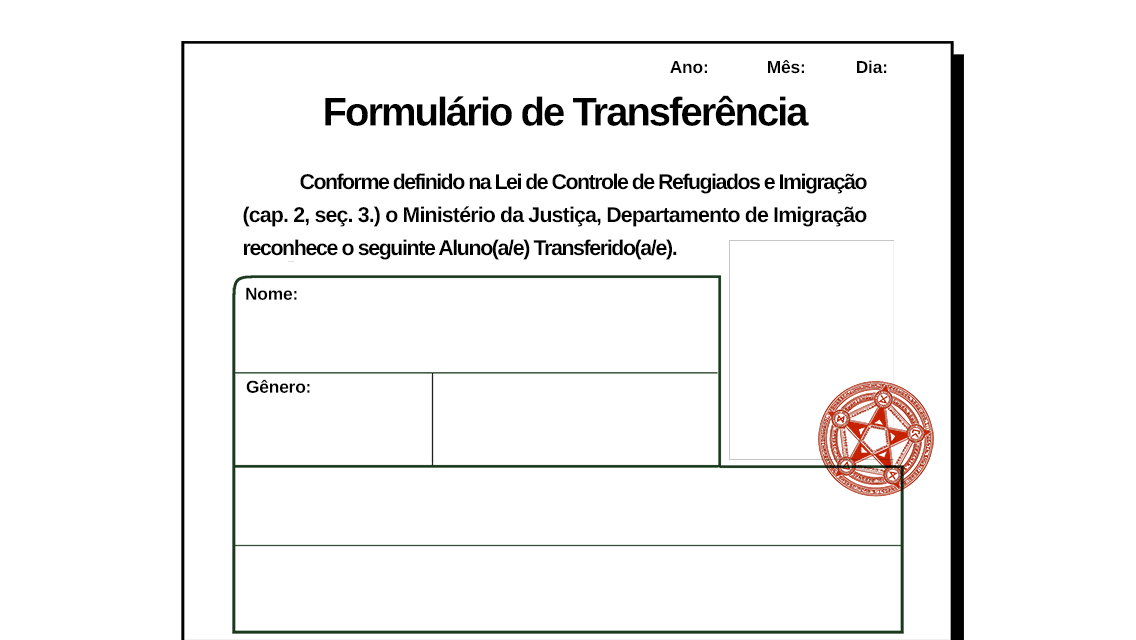
<style>
.page{position:relative;width:1136px;height:640px;background:#ffffff}
.page>*{position:absolute;margin:0}
.t1{font:17.3px "ArimoRoman-Bold";letter-spacing:-0.01em;color:#000000}
.t2{font:40px "ArimoRoman-Bold";letter-spacing:-0.05em;color:#000000}
.t3{font:21.3px "ArimoRoman-Bold";letter-spacing:-0.07em;color:#000000}
.t4{font:21.3px "ArimoRoman-Bold";letter-spacing:-0.039em;color:#000000}
.t5{font:21.3px "ArimoRoman-Bold";letter-spacing:-0.064em;color:#000000}
</style>
<div class="page">
<p class="t1" style="left:670px;top:61px;width:37px;height:13px">Ano:</p>
<p class="t1" style="left:768px;top:60px;width:36px;height:14px">Mês:</p>
<p class="t1" style="left:857px;top:60px;width:30px;height:14px">Dia:</p>
<p class="t2" style="left:325px;top:95px;width:484px;height:31px">Formulário de Transferência</p>
<p class="t3" style="left:300px;top:173px;width:567px;height:21px">Conforme definido na Lei de Controle de Refugiados e Imigração</p>
<p class="t4" style="left:243px;top:206px;width:624px;height:21px">(cap. 2, seç. 3.) o Ministério da Justiça, Departamento de Imigração</p>
<p class="t5" style="left:244px;top:239px;width:433px;height:21px">reconhece o seguinte Aluno(a/e) Transferido(a/e).</p>
<p class="t1" style="left:246px;top:287px;width:51px;height:13px">Nome:</p>
<p class="t1" style="left:246px;top:379px;width:64px;height:14px">Gênero:</p>
</div>
